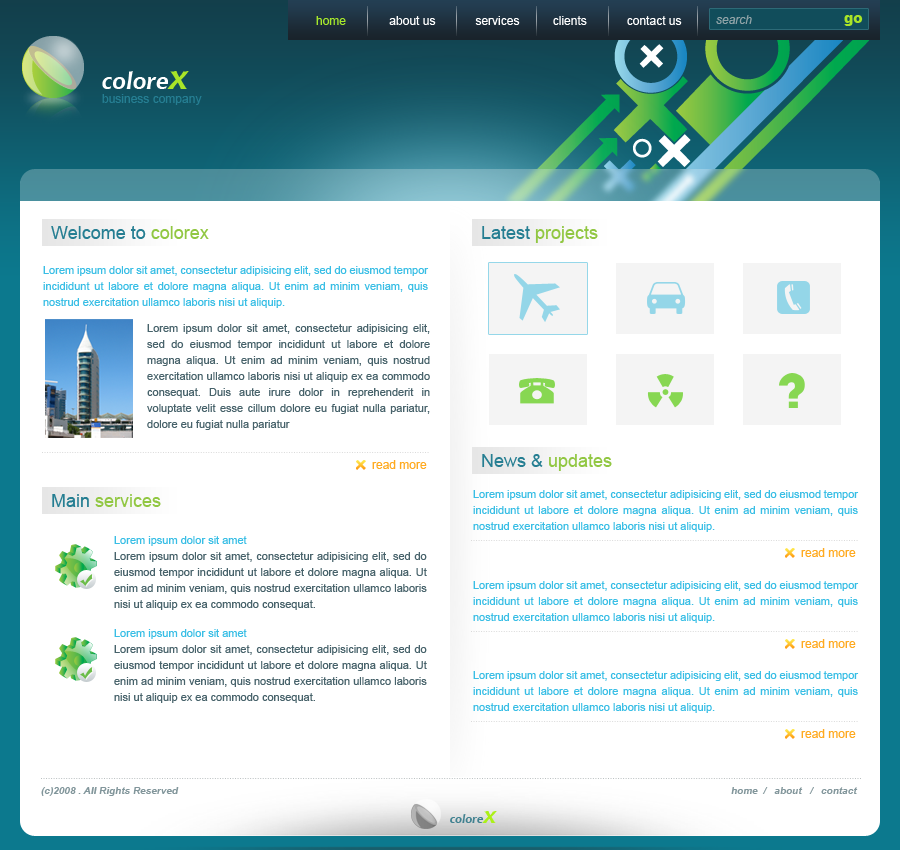
<style>
.page{position:relative;width:900px;height:850px;background:#ffffff}
.page>*{position:absolute;margin:0}
.t1{font:12px "ArialMT";color:#ffffff}
.t2{font:12px "ArialMT";color:#a6e72b}
.t3{font:12px "Arial-ItalicMT";color:#90a3a7}
.t4{font:14px "Arial-Black";color:#a9e528}
.t5{font:24px "ChiantiBT-BoldItalic";color:#ffffff}
.t6{font:36px "ChiantiBT-BoldItalic";color:#a9e528}
.t7{font:12px "ArialMT";color:#257e92}
.t8{font:18px "ArialMT";color:#257e92}
.t9{font:18px "ArialMT";color:#91c742}
.t10{font:11px/16px "ArialMT";color:#39bee5}
.t11{font:11px/16px "ArialMT";color:#48636b}
.t12{font:12px "ArialMT";color:#ffaa20}
.t13{font:10px "Arial-BoldItalicMT";color:#82969b}
.t14{font:12px "ChiantiBT-BoldItalic";color:#408190}
.t15{font:24px "ChiantiBT-BoldItalic";color:#abf017}
</style>
<div class="page">
<p class="t1" style="left:316px;top:16px;width:366px;height:9px"><span class="t2">home</span>             about us            services          clients            contact us</p>
<p class="t3" style="left:716px;top:15px;width:36px;height:9px">search</p>
<p class="t4" style="left:844px;top:15px;width:19px;height:11px">go</p>
<p class="t5" style="left:102px;top:71px;width:87px;height:18px">colore<span class="t6">x</span></p>
<p class="t7" style="left:102px;top:94px;width:100px;height:11px">business company</p>
<p class="t8" style="left:51px;top:226px;width:158px;height:13px">Welcome to <span class="t9">colorex</span></p>
<p class="t9" style="left:482px;top:226px;width:116px;height:17px"><span class="t8">Latest </span>projects</p>
<p class="t10" style="left:43px;top:266px;width:386px;height:42px;text-align:justify">Lorem ipsum dolor sit amet, consectetur adipisicing elit, sed do eiusmod tempor incididunt ut labore et dolore magna aliqua. Ut enim ad minim veniam, quis nostrud exercitation ullamco laboris nisi ut aliquip.</p>
<p class="t11" style="left:147px;top:324px;width:283px;height:106px;text-align:justify">Lorem ipsum dolor sit amet, consectetur adipisicing elit, sed do eiusmod tempor incididunt ut labore et dolore magna aliqua. Ut enim ad minim veniam, quis nostrud exercitation ullamco laboris nisi ut aliquip ex ea commodo consequat. Duis aute irure dolor in reprehenderit in voluptate velit esse cillum dolore eu fugiat nulla pariatur,  dolore eu fugiat nulla pariatur</p>
<p class="t12" style="left:372px;top:460px;width:55px;height:9px">read more</p>
<p class="t9" style="left:482px;top:454px;width:130px;height:17px"><span class="t8">News &amp; </span>updates</p>
<p class="t9" style="left:52px;top:494px;width:109px;height:13px"><span class="t8">Main </span>services</p>
<p class="t10" style="left:473px;top:490px;width:386px;height:42px;text-align:justify">Lorem ipsum dolor sit amet, consectetur adipisicing elit, sed do eiusmod tempor incididunt ut labore et dolore magna aliqua. Ut enim ad minim veniam, quis nostrud exercitation ullamco laboris nisi ut aliquip.</p>
<p class="t11" style="left:114px;top:536px;width:313px;height:74px;text-align:justify"><span class="t10">Lorem ipsum dolor sit amet<br></span>Lorem ipsum dolor sit amet, consectetur adipisicing elit, sed do eiusmod tempor incididunt ut labore et dolore magna aliqua. Ut enim ad minim veniam, quis nostrud exercitation ullamco laboris nisi ut aliquip ex ea commodo consequat.</p>
<p class="t12" style="left:801px;top:548px;width:55px;height:9px">read more</p>
<p class="t10" style="left:473px;top:581px;width:386px;height:42px;text-align:justify">Lorem ipsum dolor sit amet, consectetur adipisicing elit, sed do eiusmod tempor incididunt ut labore et dolore magna aliqua. Ut enim ad minim veniam, quis nostrud exercitation ullamco laboris nisi ut aliquip.</p>
<p class="t11" style="left:114px;top:629px;width:313px;height:74px;text-align:justify"><span class="t10">Lorem ipsum dolor sit amet<br></span>Lorem ipsum dolor sit amet, consectetur adipisicing elit, sed do eiusmod tempor incididunt ut labore et dolore magna aliqua. Ut enim ad minim veniam, quis nostrud exercitation ullamco laboris nisi ut aliquip ex ea commodo consequat.</p>
<p class="t12" style="left:801px;top:639px;width:55px;height:9px">read more</p>
<p class="t10" style="left:473px;top:671px;width:386px;height:42px;text-align:justify">Lorem ipsum dolor sit amet, consectetur adipisicing elit, sed do eiusmod tempor incididunt ut labore et dolore magna aliqua. Ut enim ad minim veniam, quis nostrud exercitation ullamco laboris nisi ut aliquip.</p>
<p class="t12" style="left:801px;top:729px;width:55px;height:9px">read more</p>
<p class="t13" style="left:41px;top:787px;width:138px;height:9px">(c)2008 . All Rights Reserved</p>
<p class="t13" style="left:731px;top:787px;width:127px;height:7px">home  /   about   /   contact</p>
<p class="t14" style="left:450px;top:811px;width:47px;height:12px">colore<span class="t15">x</span></p>
</div>
